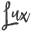
<style>
.page{position:relative;width:32px;height:32px;background:#ffffff}
.page>*{position:absolute;margin:0}
.t1{font:30px "TropicalNightsBold-Bold";color:#3b3b3b}
</style>
<div class="page">
<p class="t1" style="left:1px;top:1px;width:30px;height:30px">Lux</p>
</div>
